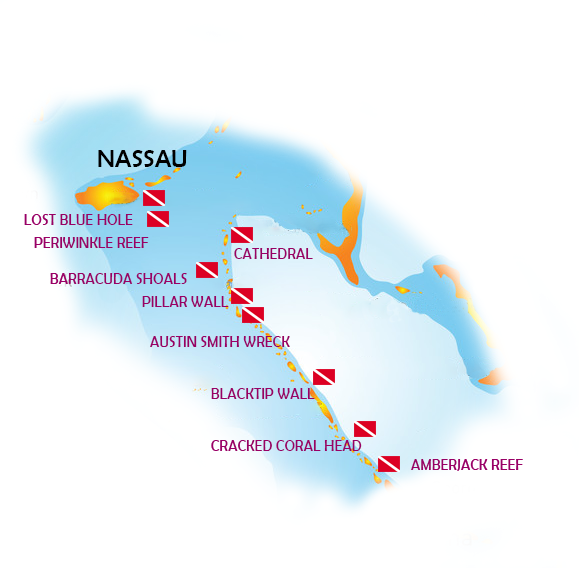
<style>
.page{position:relative;width:579px;height:568px;background:#ffffff}
.page>*{position:absolute;margin:0}
.t1{font:25px "BerlinSansFB-Reg";color:#000000}
.t2{font:16.3px "BerlinSansFB-Reg";color:#990066;scale:0.88 1}
</style>
<div class="page">
<p class="t1" style="left:98px;top:150px;width:89px;height:17px">NASSAU</p>
<p class="t2" style="left:24px;top:214px;width:109px;height:11px">LOST BLUE HOLE</p>
<p class="t2" style="left:34px;top:237px;width:115px;height:11px">PERIWINKLE REEF</p>
<p class="t2" style="left:234px;top:248px;width:79px;height:11px">CATHEDRAL</p>
<p class="t2" style="left:50px;top:273px;width:137px;height:11px">BARRACUDA SHOALS</p>
<p class="t2" style="left:142px;top:296px;width:87px;height:11px">PILLAR WALL</p>
<p class="t2" style="left:150px;top:336px;width:140px;height:11px">AUSTIN SMITH WRECK</p>
<p class="t2" style="left:211px;top:388px;width:104px;height:11px">BLACKTIP WALL</p>
<p class="t2" style="left:211px;top:440px;width:151px;height:11px">CRACKED CORAL HEAD</p>
<p class="t2" style="left:411px;top:459px;width:112px;height:12px">AMBERJACK REEF</p>
</div>
